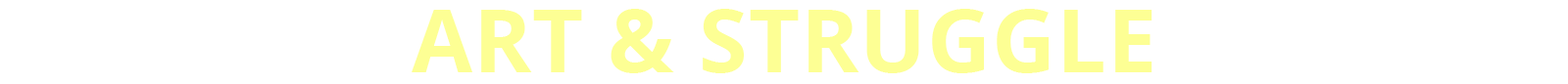
<style>
.page{position:relative;width:1568px;height:84px;background:#ffffff}
.page>*{position:absolute;margin:0}
.t1{font:88.2px "OpenSans-Bold";letter-spacing:0.01em;color:#fdff94;text-transform:uppercase}
</style>
<div class="page">
<p class="t1" style="left:412px;top:9px;width:740px;height:65px">art &amp; struggle</p>
</div>
